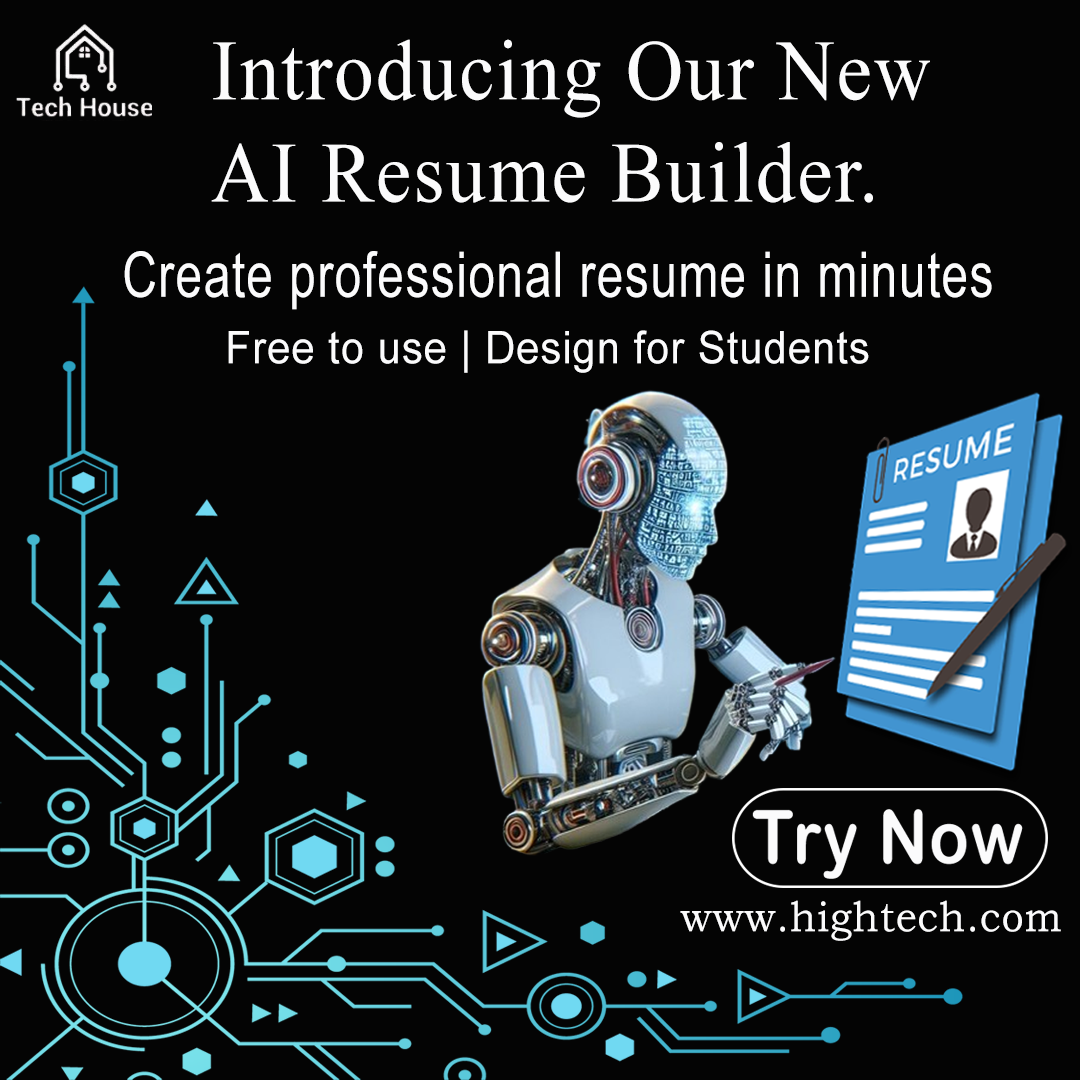
<style>
.page{position:relative;width:1080px;height:1080px;background:#040404}
.page>*{position:absolute;margin:0}
.t1{font:85.8px/102.3px "TimesNewRomanPSMT";letter-spacing:0.025em;color:#fbfbfc;scale:0.93 1}
.t2{font:63px/66.7px "ArialNarrow";letter-spacing:0.025em;color:#fbfbfc;scale:0.93 1}
.t3{font:45px/66.7px "ArialMT";letter-spacing:0.025em;color:#fbfbfc;scale:0.93 1}
.t4{font:42.9px "BookmanOldStyle";letter-spacing:0.025em;color:#fbfbfc;scale:0.93 1}
.t5{font:54.5px "BookmanOldStyle-Bold";letter-spacing:0.025em;color:#fbfbfc;scale:0.93 1}
</style>
<div class="page">
<p class="t1" style="left:211px;top:39px;width:719px;height:164px">Introducing Our New<br>AI Resume Builder.</p>
<p class="t2" style="left:124px;top:251px;width:868px;height:122px">Create professional resume in minutes<br>       <span class="t3">Free to use | Design for Students</span></p>
<p class="t4" style="left:680px;top:900px;width:381px;height:41px"><span class="t5">     </span>www.hightech.com</p>
</div>
